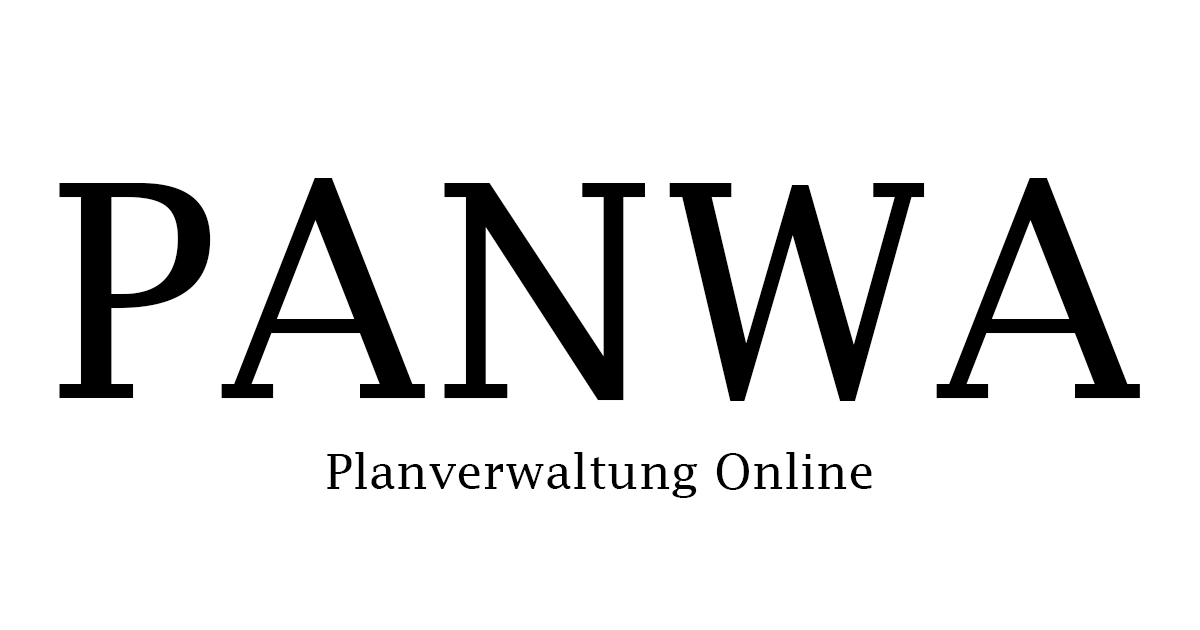
<style>
.page{position:relative;width:1200px;height:630px;background:#ffffff}
.page>*{position:absolute;margin:0}
.t1{font:298px "LucidaFax";color:#000000}
.t2{font:48px "LucidaFax";color:#000000}
</style>
<div class="page">
<p class="t1" style="left:59px;top:178px;width:1081px;height:223px">PANWA</p>
<p class="t2" style="left:327px;top:452px;width:545px;height:46px">Planverwaltung Online</p>
</div>
